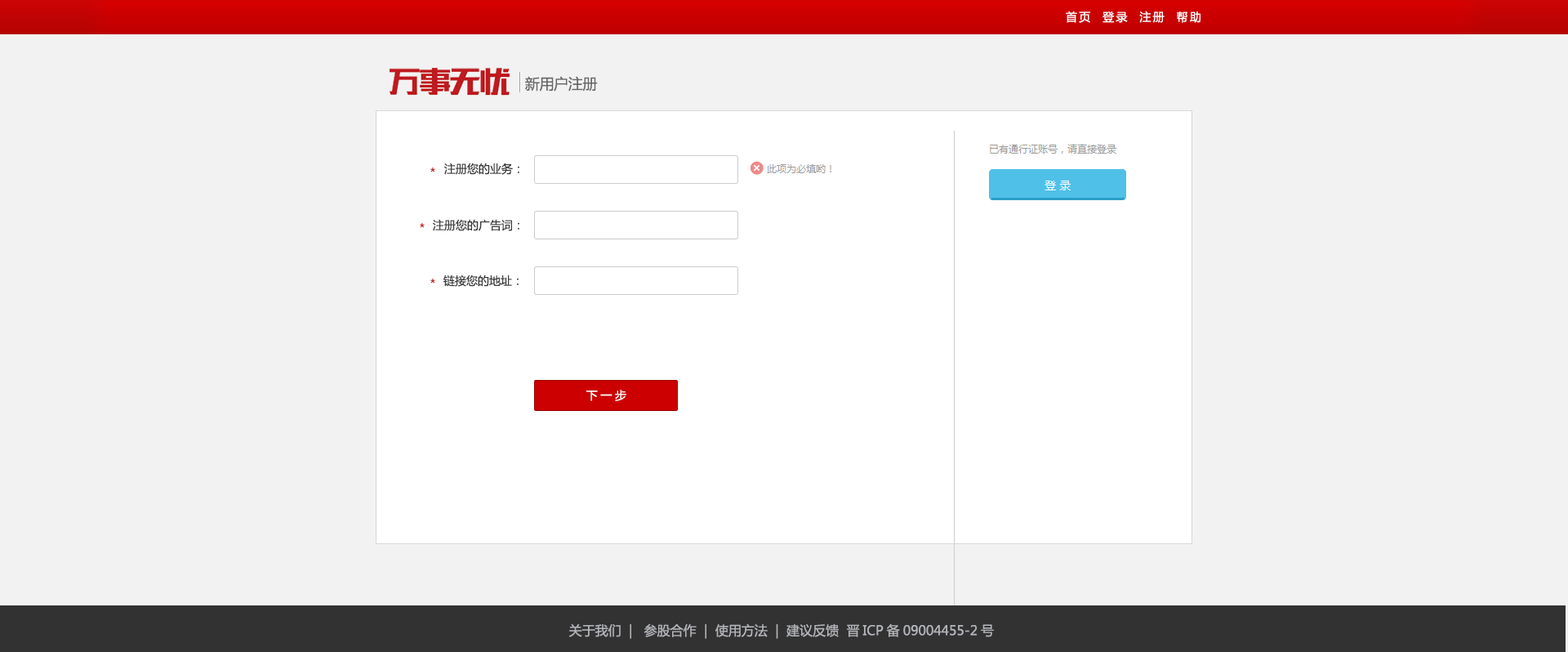
<style>
.page{position:relative;width:1568px;height:652px;background:#f2f2f2}
.page>*{position:absolute;margin:0}
.t1{font:11.4px "MicrosoftYaHei";letter-spacing:0.16em;color:#ffffff}
.t2{font:14.7px "MicrosoftYaHei";letter-spacing:-0.02em;color:#666666}
.t3{font:11.4px "MicrosoftYaHei";color:#bf1a20}
.t4{font:11.4px "MicrosoftYaHei";color:#383838}
.t5{font:11.4px "MicrosoftYaHei";letter-spacing:0.26em;color:#ffffff}
.t6{font:13.1px "MicrosoftYaHei";color:#b3b5ba}
</style>
<div class="page">
<p class="t1" style="left:1066px;top:11px;width:134px;height:12px">首页  登录  注册  帮助</p>
<p class="t2" style="left:525px;top:76px;width:73px;height:15px">新用户注册</p>
<p class="t3" style="left:430px;top:167px;width:5px;height:5px">*</p>
<p class="t4" style="left:444px;top:163px;width:75px;height:12px">注册您的业务：</p>
<p class="t4" style="left:433px;top:219px;width:86px;height:12px">注册您的广告词：</p>
<p class="t3" style="left:420px;top:223px;width:5px;height:5px">*</p>
<p class="t3" style="left:430px;top:278px;width:5px;height:5px">*</p>
<p class="t4" style="left:443px;top:274px;width:76px;height:13px">链接您的地址：</p>
<p class="t5" style="left:586px;top:390px;width:40px;height:11px">下一步</p>
<p class="t6" style="left:568px;top:623px;width:426px;height:16px">关于我们  |   参股合作  |  使用方法  |  建议反馈  晋ICP备09004455-2号</p>
</div>
